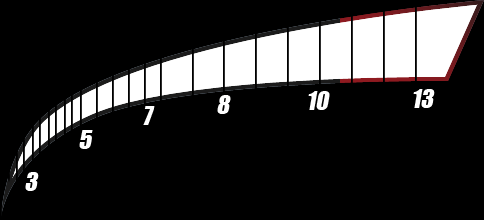
<style>
.page{position:relative;width:484px;height:220px;background:#000000}
.page>*{position:absolute;margin:0}
.t1{font:24px "Impact";color:#ffffff;font-style:italic}
</style>
<div class="page">
<p class="t1" style="left:413px;top:89px;width:22px;height:19px">13</p>
<p class="t1" style="left:217px;top:95px;width:14px;height:19px">8</p>
<p class="t1" style="left:308px;top:91px;width:22px;height:19px">10</p>
<p class="t1" style="left:143px;top:106px;width:12px;height:19px">7</p>
<p class="t1" style="left:79px;top:130px;width:14px;height:19px">5</p>
<p class="t1" style="left:25px;top:172px;width:14px;height:19px">3</p>
</div>
